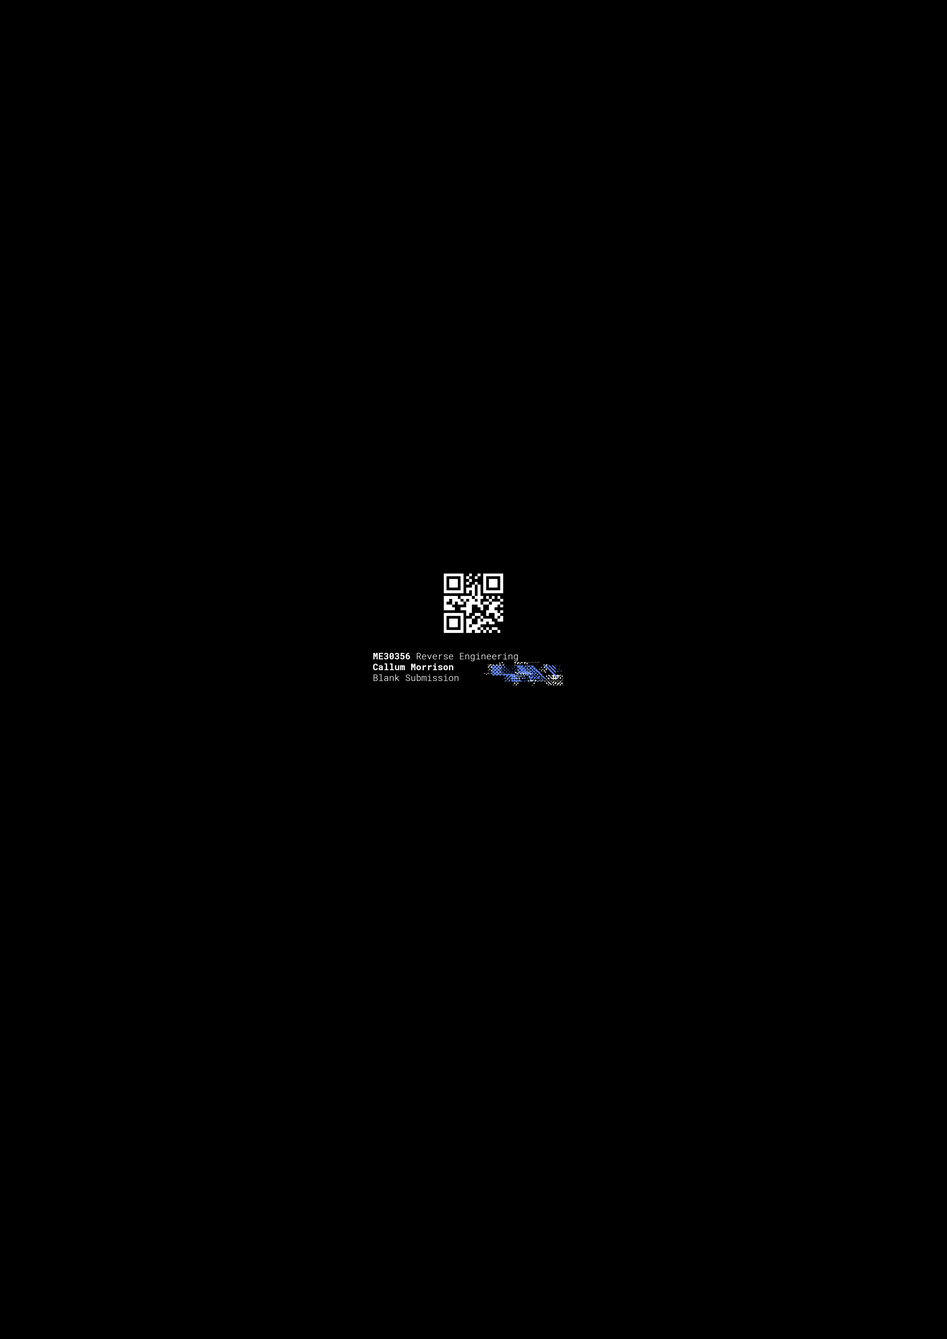
<style>
.page{position:relative;width:947px;height:1339px;background:#000000}
.page>*{position:absolute;margin:0}
.t1{font:9px "RobotoMono-Light";color:#ffffff}
.t2{font:9px "RobotoMono-Bold";color:#ffffff}
</style>
<div class="page">
<p class="t1" style="left:373px;top:653px;width:145px;height:28px"><span class="t2">ME30356 </span>Reverse Engineering<br><span class="t2">Callum Morrison<br></span>Blank Submission</p>
</div>
